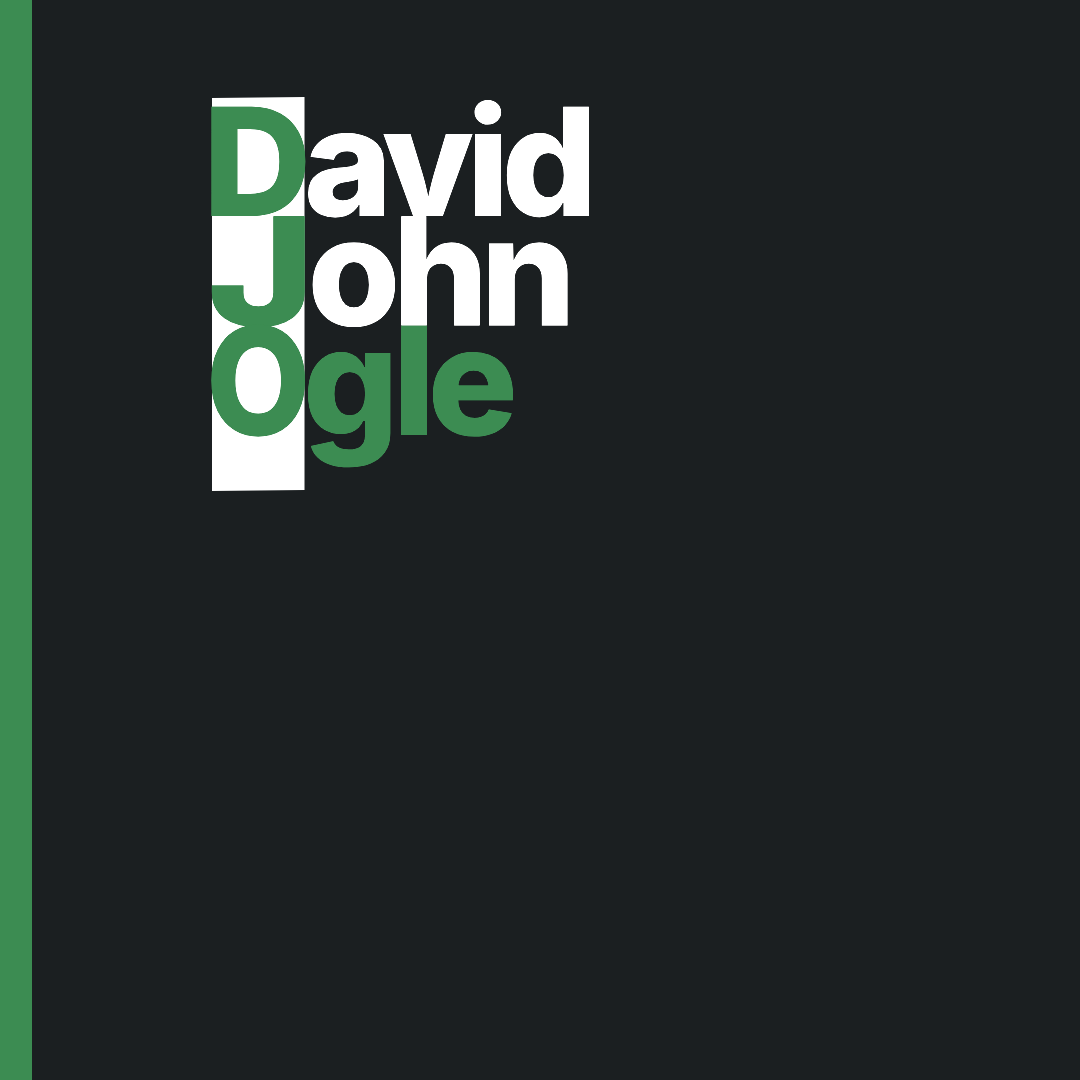
<style>
.page{position:relative;width:1080px;height:1080px;background:#1b1f21}
.page>*{position:absolute;margin:0}
.t1{font:150px "Inter-ExtraBold";letter-spacing:-0.05em;color:#ffffff}
.t2{font:150px "Inter-ExtraBold";letter-spacing:-0.05em;color:#3c8c52}
.t3{font:150px "Inter-ExtraBold_14.000opsz_800.000wght";letter-spacing:-0.05em;color:#3c8c52;scale:1.22 1}
.t4{font:150px "Inter-ExtraBold";letter-spacing:-0.05em;color:#3c8c52;scale:0.9 1}
.t5{font:150px "Inter-ExtraBold";letter-spacing:-0.04em;color:#3c8c52}
</style>
<div class="page">
<p class="t1" style="left:211px;top:99px;width:378px;height:369px"><span class="t2">D</span>avid<br><span class="t3">J</span>ohn<br><span class="t4">O</span><span class="t5">g</span><span class="t2">le</span></p>
</div>
